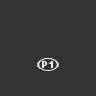
<style>
.page{position:relative;width:96px;height:96px;background:#333333}
.page>*{position:absolute;margin:0}
.t1{font:9px "ArialMT";color:#ffffff;font-weight:bold}
.t2{font:10px "ArialMT";color:#ffffff;font-weight:bold}
</style>
<div class="page">
<p class="t1" style="left:42px;top:61px;width:5px;height:7px">p</p>
<p class="t2" style="left:49px;top:61px;width:4px;height:7px">1</p>
</div>
